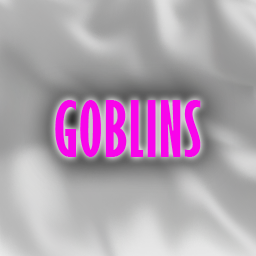
<style>
.page{position:relative;width:256px;height:256px}
.page>*{position:absolute;margin:0}
.t1{font:72px "GillSansMT-ExtraCondensedBold";letter-spacing:0.025em;color:#f804ea}
</style>
<div class="page">
<p class="t1" style="left:55px;top:100px;width:146px;height:57px">GOBLINS</p>
</div>
